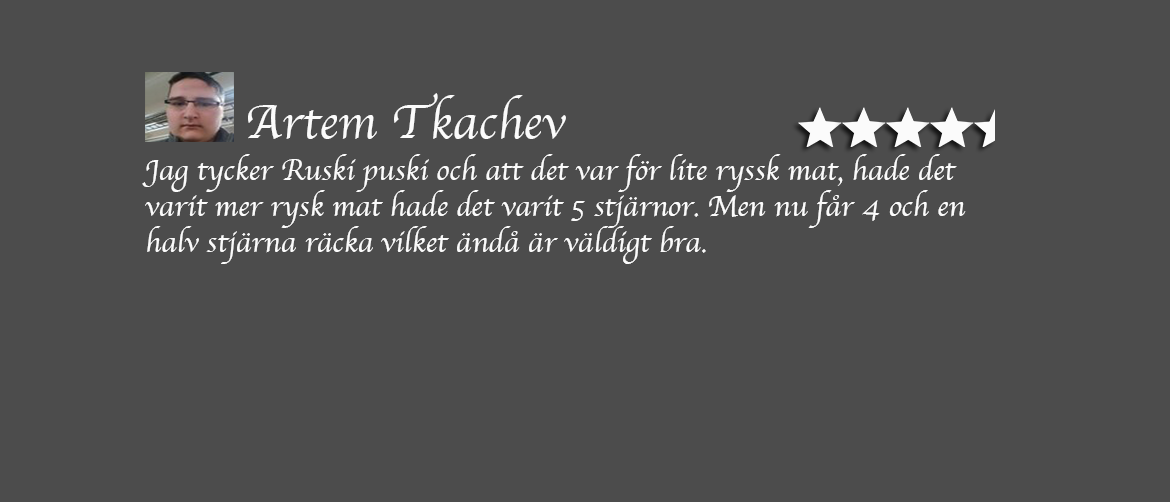
<style>
.page{position:relative;width:1170px;height:502px;background:#4c4c4c}
.page>*{position:absolute;margin:0}
.t1{font:50px "Apple-Chancery";color:#fbfbfb}
.t2{font:30px "Apple-Chancery";color:#fbfbfb}
</style>
<div class="page">
<p class="t1" style="left:248px;top:93px;width:318px;height:46px">Artem Tkachev</p>
<p class="t2" style="left:142px;top:154px;width:824px;height:110px">Jag tycker Ruski puski och att det var för lite ryssk mat, hade det varit mer rysk mat hade det varit 5 stjärnor. Men nu får 4 och en halv stjärna räcka vilket ändå är väldigt bra.</p>
</div>
